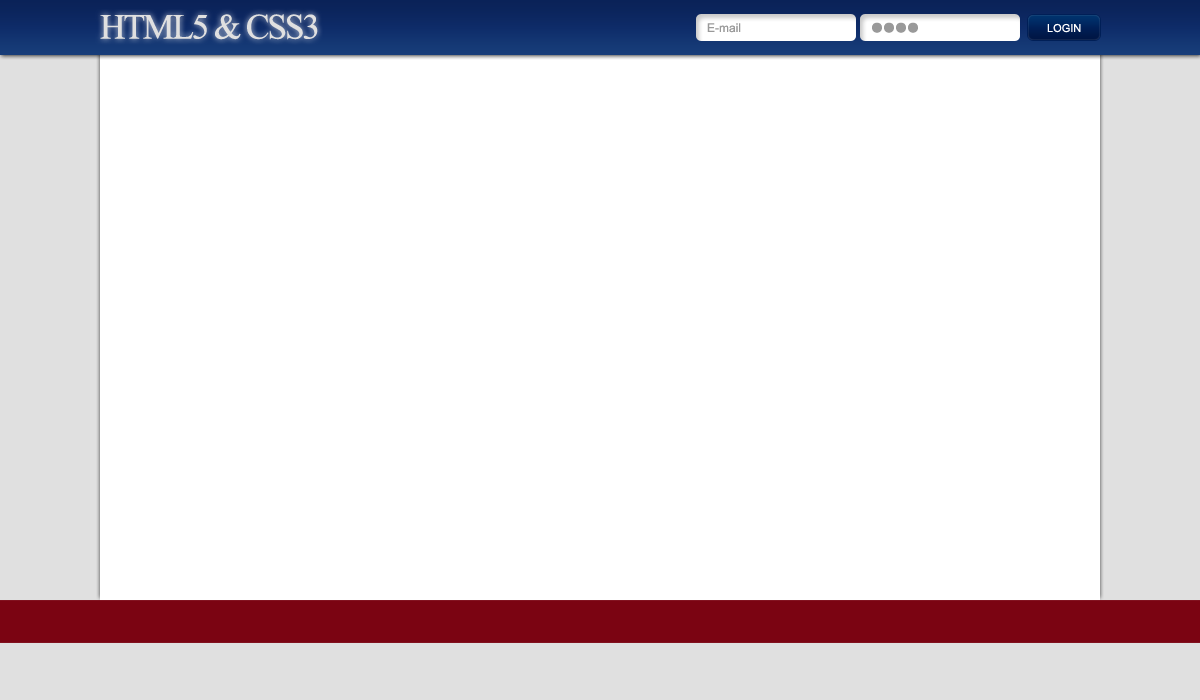
<style>
.page{position:relative;width:1200px;height:700px;background:#ffffff}
.page>*{position:absolute;margin:0}
.t1{font:44px "Aparajita";letter-spacing:-0.05em;color:#e0e0e0}
.t2{font:12px "ArialMT";color:#999999}
.t3{font:12px "Gulim";color:#999999}
.t4{font:11px "ArialMT";color:#ffffff;text-transform:uppercase}
</style>
<div class="page">
<p class="t1" style="left:100px;top:14px;width:218px;height:26px">HTML5 &amp; CSS3</p>
<p class="t2" style="left:707px;top:23px;width:34px;height:10px">E-mail</p>
<p class="t3" style="left:872px;top:22px;width:46px;height:11px">●●●●</p>
<p class="t4" style="left:1047px;top:23px;width:34px;height:10px">login</p>
</div>
